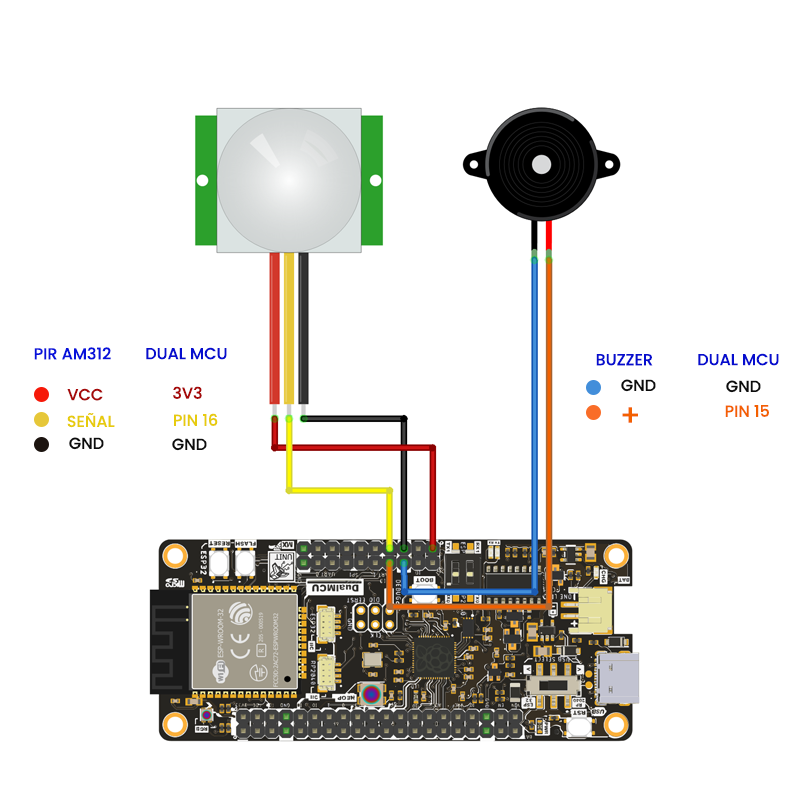
<style>
.page{position:relative;width:800px;height:800px;background:#ffffff}
.page>*{position:absolute;margin:0}
.t1{font:16px "Poppins-Medium";color:#0711db}
.t2{font:16px "Poppins-Medium";color:#060dce}
.t3{font:16px "Poppins-Medium";color:#a60909}
.t4{font:16px "Poppins-Medium";color:#0c0c0c}
.t5{font:16px "Poppins-Medium";color:#e7cb0d}
.t6{font:30px "Poppins-Medium";color:#f36000}
.t7{font:16px "Poppins-Medium";color:#f36000}
</style>
<div class="page">
<p class="t1" style="left:34px;top:347px;width:77px;height:13px">PIR AM312</p>
<p class="t2" style="left:146px;top:347px;width:81px;height:13px">DUAL MCU</p>
<p class="t2" style="left:698px;top:353px;width:81px;height:13px">DUAL MCU</p>
<p class="t2" style="left:596px;top:354px;width:57px;height:12px">BUZZER</p>
<p class="t3" style="left:67px;top:388px;width:36px;height:13px">VCC</p>
<p class="t3" style="left:173px;top:386px;width:29px;height:13px">3V3</p>
<p class="t4" style="left:621px;top:379px;width:35px;height:13px">GND</p>
<p class="t4" style="left:726px;top:380px;width:35px;height:13px">GND</p>
<p class="t5" style="left:67px;top:413px;width:48px;height:15px">SEÑAL</p>
<p class="t5" style="left:174px;top:413px;width:44px;height:13px">PIN 16</p>
<p class="t6" style="left:622px;top:407px;width:16px;height:16px">+</p>
<p class="t7" style="left:725px;top:405px;width:44px;height:12px">PIN 15</p>
<p class="t4" style="left:69px;top:437px;width:35px;height:13px">GND</p>
<p class="t4" style="left:172px;top:438px;width:35px;height:13px">GND</p>
</div>
